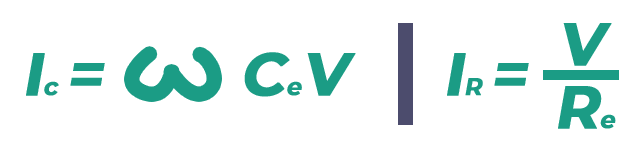
<style>
.page{position:relative;width:644px;height:155px;background:#ffffff}
.page>*{position:absolute;margin:0}
.t1{font:60px "Montserrat-Bold";letter-spacing:0.005em;color:#1b9c85;font-weight:bold;font-style:italic}
.t2{font:24px "Montserrat-Bold";letter-spacing:0.005em;color:#1b9c85;font-weight:bold;font-style:italic}
</style>
<div class="page">
<p class="t1" style="left:563px;top:23px;width:49px;height:43px">V</p>
<p class="t1" style="left:26px;top:53px;width:79px;height:43px">I<span class="t2">c </span>=</p>
<p class="t1" style="left:244px;top:52px;width:112px;height:45px">C<span class="t2">e</span>V</p>
<p class="t1" style="left:447px;top:53px;width:82px;height:43px">I<span class="t2">R </span>=</p>
<p class="t1" style="left:558px;top:86px;width:58px;height:43px">R<span class="t2">e</span></p>
</div>
